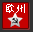
<style>
.page{position:relative;width:33px;height:32px;background:#c50000}
.page>*{position:absolute;margin:0}
.t1{font:10.4px "SimSun";color:#ffffff}
</style>
<div class="page">
<p class="t1" style="left:6px;top:4px;width:19px;height:9px">欧州</p>
</div>
